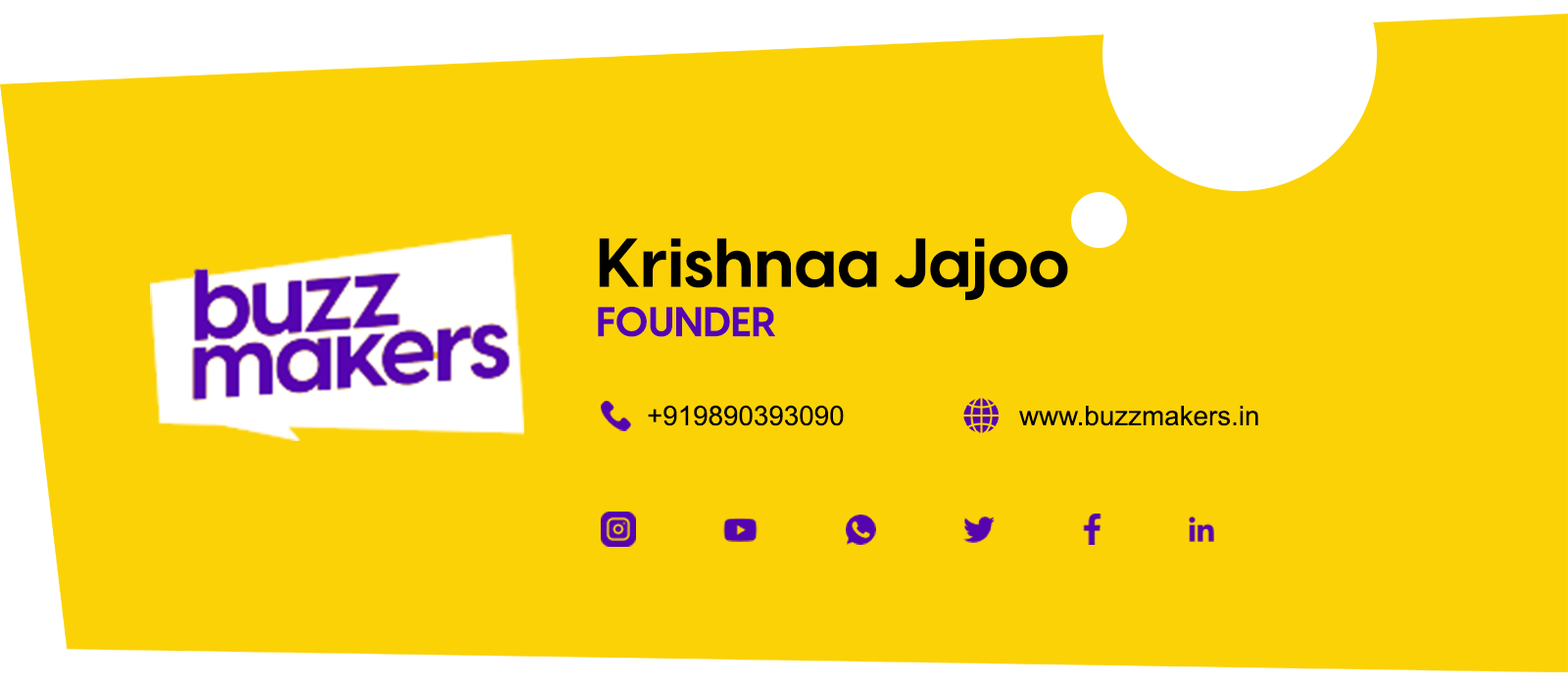
<style>
.page{position:relative;width:1568px;height:686px;background:#fbd206}
.page>*{position:absolute;margin:0}
.t1{font:68.1px "FONTSPRINGDEMO-VisbyCFBoldRegular";color:#000000}
.t2{font:40.8px "FONTSPRINGDEMO-VisbyCFBoldRegular";color:#5504b0}
.t3{font:27.2px "ArialMT";color:#000000}
</style>
<div class="page">
<p class="t1" style="left:599px;top:238px;width:469px;height:63px">Krishnaa Jajoo</p>
<p class="t2" style="left:598px;top:307px;width:177px;height:30px">FOUNDER</p>
<p class="t3" style="left:648px;top:405px;width:196px;height:21px">+919890393090</p>
<p class="t3" style="left:1019px;top:406px;width:239px;height:20px">www.buzzmakers.in</p>
</div>
